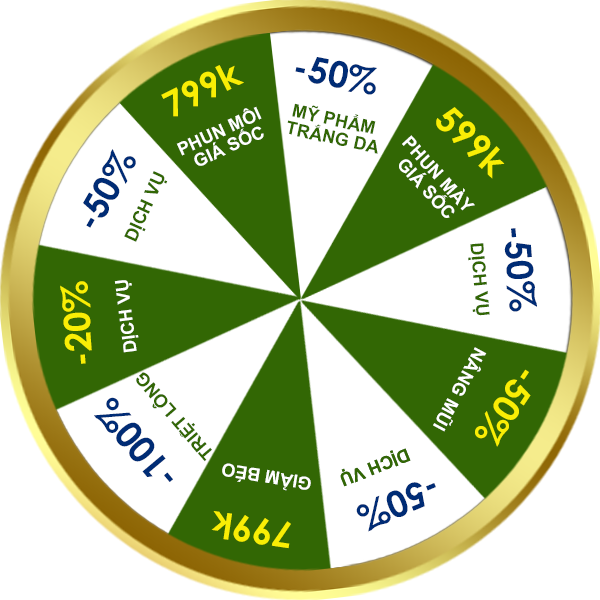
<style>
.page{position:relative;width:600px;height:600px;background:#ffffff}
.page>*{position:absolute;margin:0}
.t1{font:36px "CenturyGothic-Bold";color:#f9ee05}
.t2{font:36px "CenturyGothic-Bold";color:#002c75}
.t3{font:18px/18px "Arial-BoldMT";color:#ffffff}
.t4{font:18px/18px "Arial-BoldMT";color:#326704}
.t5{font:18px "Arial-BoldMT";color:#326704}
.t6{font:35.9px "CenturyGothic-Bold";color:#002c75}
.t7{font:35.9px "CenturyGothic-Bold";color:#f9ee05}
.t8{font:18px "Arial-BoldMT";color:#ffffff}
</style>
<div class="page">
<p class="t1" style="left:161px;top:65px;width:83px;height:52px;rotate:-27deg">799k</p>
<p class="t2" style="left:295px;top:57px;width:82px;height:38px;rotate:11deg">-50%</p>
<p class="t3" style="left:176px;top:106px;width:88px;height:60px;text-align:center;rotate:-25deg">PHUN MÔI <br>GIÁ SỐC</p>
<p class="t4" style="left:287px;top:103px;width:91px;height:51px;text-align:center;rotate:12deg">MỸ PHẨM <br>TRẮNG DA</p>
<p class="t1" style="left:436px;top:107px;width:69px;height:72px;rotate:43deg">599k</p>
<p class="t3" style="left:399px;top:135px;width:76px;height:83px;text-align:center;rotate:48deg">PHUN MÀY <br>GIÁ SỐC</p>
<p class="t2" style="left:83px;top:149px;width:53px;height:79px;rotate:-60deg">-50%</p>
<p class="t5" style="left:124px;top:171px;width:44px;height:71px;rotate:-66deg">DỊCH VỤ</p>
<p class="t6" style="left:504px;top:228px;width:33px;height:84px;rotate:85deg">-50%</p>
<p class="t5" style="left:468px;top:243px;width:22px;height:73px;rotate:85deg">DỊCH VỤ</p>
<p class="t7" style="left:60px;top:281px;width:32px;height:83px;rotate:-94deg">-20%</p>
<p class="t8" style="left:114px;top:280px;width:25px;height:73px;rotate:-97deg">DỊCH VỤ</p>
<p class="t8" style="left:433px;top:347px;width:54px;height:85px;rotate:118deg">NÂNG MŨI</p>
<p class="t5" style="left:136px;top:372px;width:76px;height:90px;rotate:-131deg">TRIỆT LÔNG</p>
<p class="t7" style="left:475px;top:369px;width:56px;height:78px;rotate:124deg">-50%</p>
<p class="t2" style="left:94px;top:397px;width:79px;height:85px;rotate:-130deg">-100%</p>
<p class="t5" style="left:340px;top:448px;width:71px;height:39px;rotate:158deg">DỊCH VỤ</p>
<p class="t5" style="left:340px;top:448px;width:71px;height:39px;rotate:158deg">DỊCH VỤ</p>
<p class="t8" style="left:222px;top:463px;width:89px;height:28px;rotate:-171deg">GIẢM BÉO</p>
<p class="t2" style="left:356px;top:482px;width:80px;height:50px;rotate:157deg">-50%</p>
<p class="t1" style="left:211px;top:511px;width:80px;height:38px;rotate:-172deg">799k</p>
</div>
